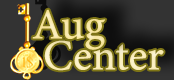
<style>
.page{position:relative;width:174px;height:80px;background:#333333}
.page>*{position:absolute;margin:0}
.t1{font:43.1px "MinionPro-Regular";color:#f7e8a7}
.t2{font:43.1px "MinionPro-Regular";color:#f9edbd}
</style>
<div class="page">
<p class="t1" style="left:32px;top:9px;width:74px;height:41px">Aug</p>
<p class="t2" style="left:44px;top:40px;width:120px;height:31px">Center</p>
</div>
